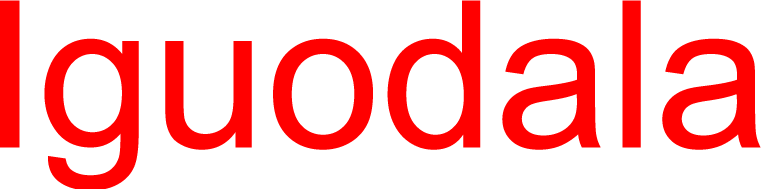
<style>
.page{position:relative;width:761px;height:189px;background:#ffffff}
.page>*{position:absolute;margin:0}
.t1{font:205px "ArialMT";color:#ff0000}
</style>
<div class="page">
<p class="t1" style="left:0px;top:0px;width:761px;height:191px">Iguodala</p>
</div>
